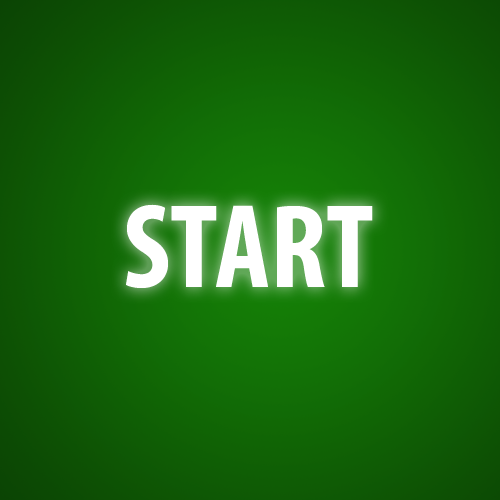
<style>
.page{position:relative;width:500px;height:500px}
.page>*{position:absolute;margin:0}
.t1{font:120px "MyriadPro-BoldCond";color:#fffefe}
</style>
<div class="page">
<p class="t1" style="left:126px;top:204px;width:247px;height:84px">START</p>
</div>
